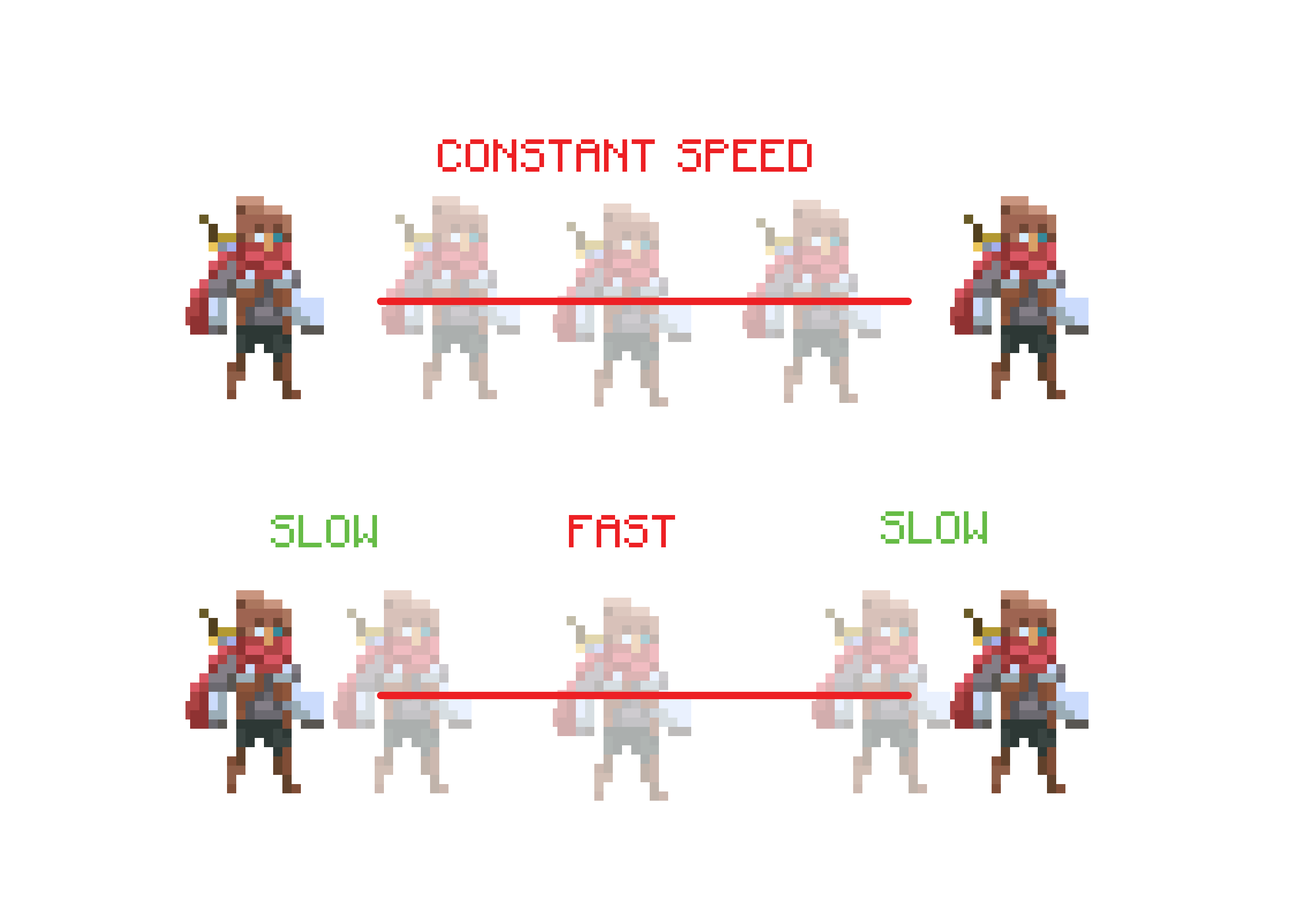
<style>
.page{position:relative;width:1292px;height:923px;background:#ffffff}
.page>*{position:absolute;margin:0}
.t1{font:46.1px "Minecraft-Regular";color:#ed2024}
.t2{font:46.1px "Minecraft-Regular";color:#66bc46}
</style>
<div class="page">
<p class="t1" style="left:438px;top:139px;width:374px;height:33px">CONSTANT SPEED</p>
<p class="t2" style="left:271px;top:515px;width:106px;height:32px">SLOW</p>
<p class="t1" style="left:569px;top:515px;width:106px;height:32px">FAST</p>
<p class="t2" style="left:881px;top:511px;width:106px;height:33px">SLOW</p>
</div>
